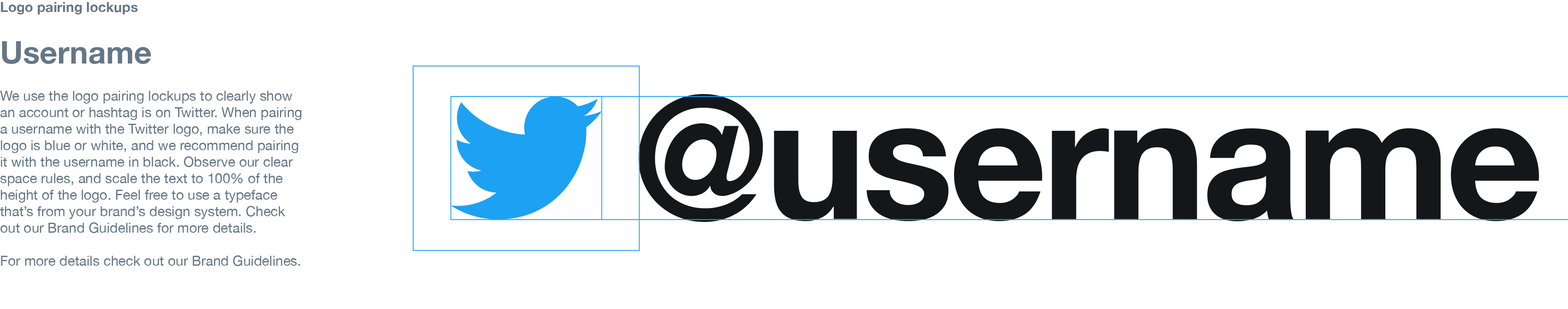
<style>
.page{position:relative;width:1568px;height:309px;background:#ffffff}
.page>*{position:absolute;margin:0}
.t1{font:13.7px "HelveticaNeue";color:#657786}
.t2{font:13.7px/30.9px "HelveticaNeue-Bold";color:#657786}
.t3{font:30.9px/30.9px "HelveticaNeue-Bold";color:#657786}
.t4{font:170.7px "HelveticaNeue-Bold";letter-spacing:-0.025em;color:#14171a}
</style>
<div class="page">
<p class="t1" style="left:0px;top:2px;width:301px;height:264px"><span class="t2">Logo pairing lockups<br><br></span><span class="t3">Username<br><br></span>We use the logo pairing lockups to clearly show an account or hashtag is on Twitter. When pairing a username with the Twitter logo, make sure the logo is blue or white, and we recommend pairing it with the username in black. Observe our clear space rules, and scale the text to 100% of the height of the logo. Feel free to use a typeface that’s from your brand’s design system. Check out our Brand Guidelines for more details.<br><br>For more details check out our Brand Guidelines.</p>
<p class="t4" style="left:638px;top:94px;width:901px;height:128px">@username</p>
</div>
